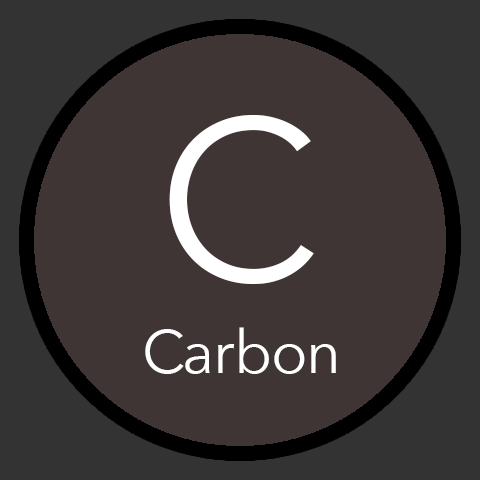
<style>
.page{position:relative;width:480px;height:480px;background:#403535}
.page>*{position:absolute;margin:0}
.t1{font:227.2px "AvenirNext-Regular";letter-spacing:-0.02em;color:#ffffff}
.t2{font:60px "AvenirNext-Regular";letter-spacing:-0.02em;color:#ffffff}
</style>
<div class="page">
<p class="t1" style="left:169px;top:115px;width:145px;height:169px">C</p>
<p class="t2" style="left:145px;top:327px;width:191px;height:47px">Carbon</p>
</div>
